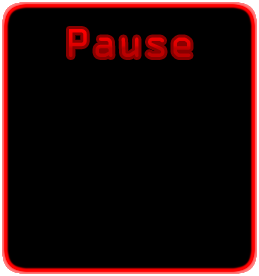
<style>
.page{position:relative;width:259px;height:276px;background:#000000}
.page>*{position:absolute;margin:0}
.t1{font:36px "OCRAStd"}
</style>
<div class="page">
<p class="t1" style="left:69px;top:29px;width:122px;height:28px">Pause</p>
</div>
